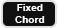
<style>
.page{position:relative;width:58px;height:28px;background:#111111}
.page>*{position:absolute;margin:0}
.t1{font:10px "Arial-BoldMT";color:#ffffff}
</style>
<div class="page">
<p class="t1" style="left:15px;top:4px;width:30px;height:19px;text-align:center">Fixed<br>Chord</p>
</div>
